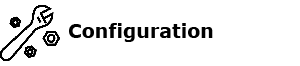
<style>
.page{position:relative;width:300px;height:66px;background:#ffffff}
.page>*{position:absolute;margin:0}
.t1{font:19px "Verdana-Bold";color:#000000}
</style>
<div class="page">
<p class="t1" style="left:69px;top:23px;width:144px;height:19px">Configuration</p>
</div>
